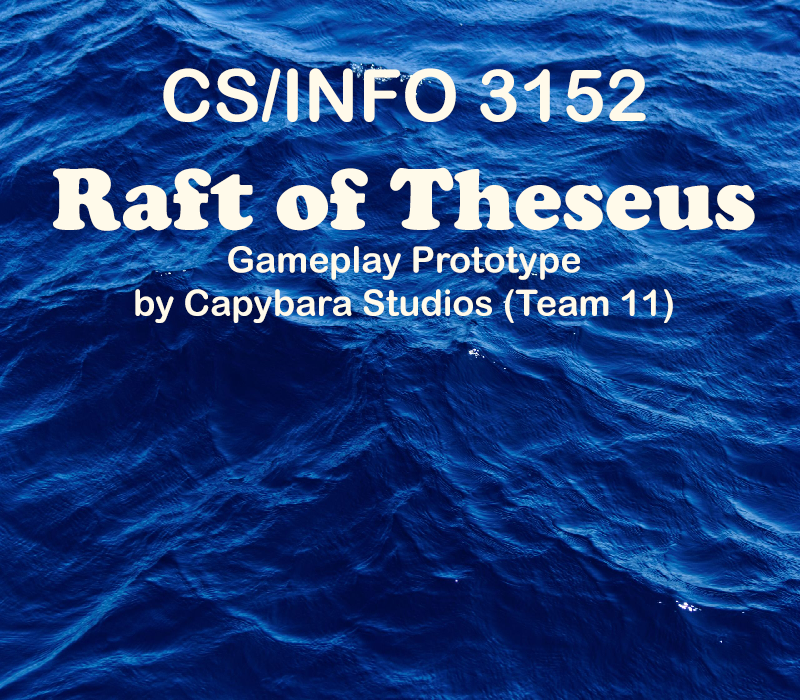
<style>
.page{position:relative;width:800px;height:700px}
.page>*{position:absolute;margin:0}
.t1{font:36px "ArialRoundedMTBold";color:#fffaea}
.t2{font:72px "ArialRoundedMTBold";color:#fffaea}
.t3{font:90px "CooperBlack";color:#fffaea}
</style>
<div class="page">
<p class="t1" style="left:53px;top:68px;width:702px;height:255px;text-align:center"><span class="t2">CS/INFO 3152<br></span><span class="t3">Raft of Theseus<br></span>Gameplay Prototype<br>by Capybara Studios (Team 11)</p>
</div>
